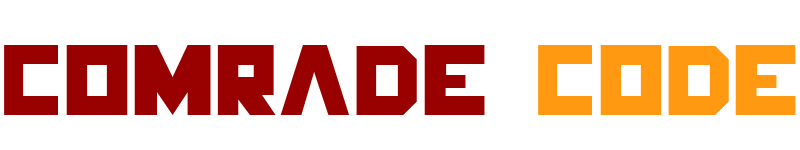
<style>
.page{position:relative;width:800px;height:150px;background:#ffffff}
.page>*{position:absolute;margin:0}
.t1{font:93px "HungerGames";color:#990000}
.t2{font:93px "HungerGames";color:#ff9911}
</style>
<div class="page">
<p class="t1" style="left:4px;top:45px;width:792px;height:70px">Comrade <span class="t2">Code</span></p>
</div>
